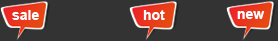
<style>
.page{position:relative;width:278px;height:41px;background:#333333}
.page>*{position:absolute;margin:0}
.t1{font:14px "Arial-BoldMT";color:#ffffff}
</style>
<div class="page">
<p class="t1" style="left:12px;top:10px;width:27px;height:10px">sale</p>
<p class="t1" style="left:143px;top:10px;width:22px;height:10px">hot</p>
<p class="t1" style="left:237px;top:11px;width:27px;height:8px">new</p>
</div>
